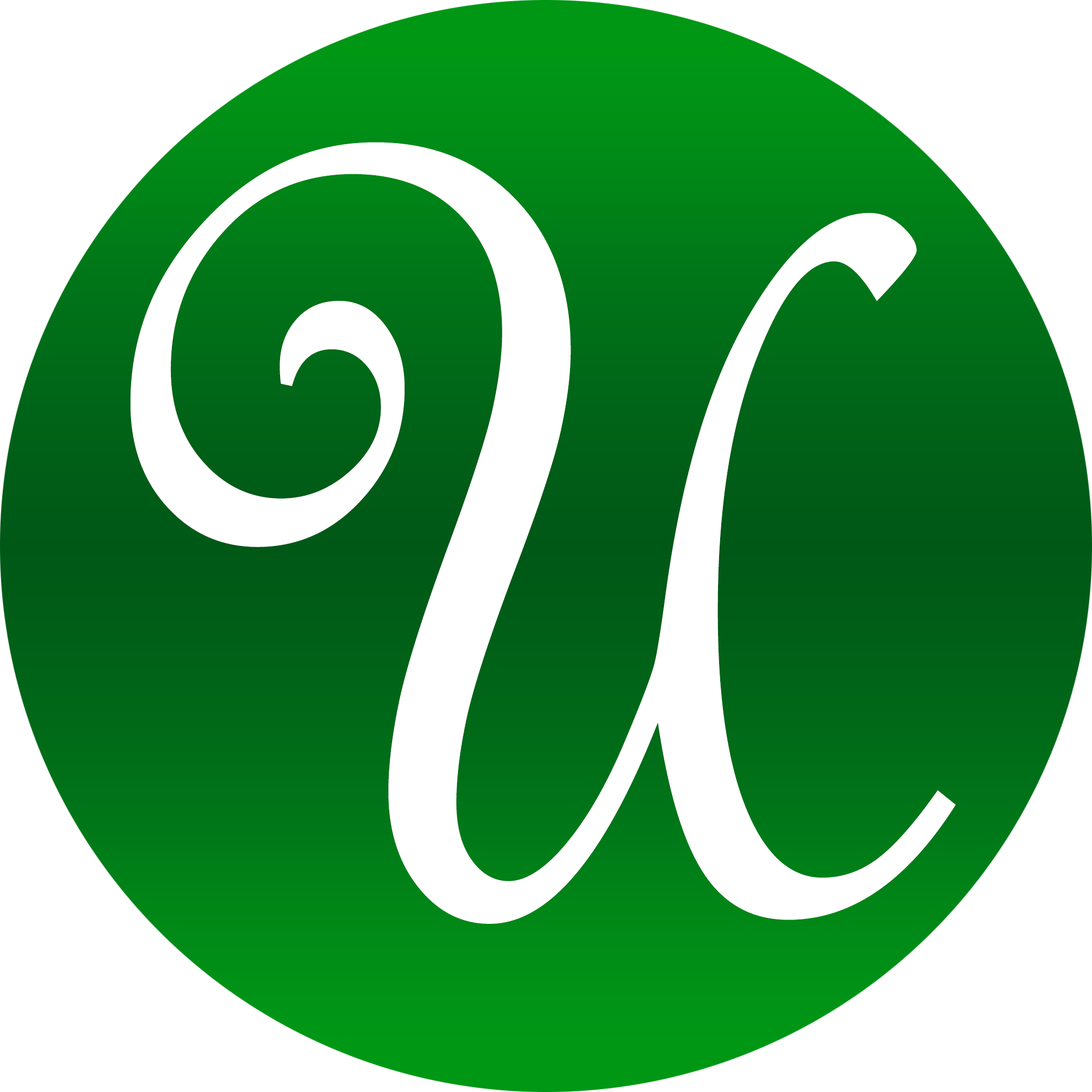
<style>
.page{position:relative;width:1092px;height:1092px;background:#ffffff}
.page>*{position:absolute;margin:0}
.t1{font:1176.8px "FrenchScriptMT";color:#ffffff}
</style>
<div class="page">
<p class="t1" style="left:130px;top:142px;width:826px;height:782px">U</p>
</div>
